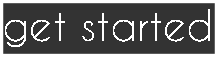
<style>
.page{position:relative;width:218px;height:57px;background:#333333}
.page>*{position:absolute;margin:0}
.t1{font:40.7px "CaviarDreams";color:#ffffff}
</style>
<div class="page">
<p class="t1" style="left:5px;top:9px;width:205px;height:38px">get started</p>
</div>
